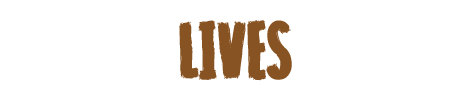
<style>
.page{position:relative;width:460px;height:100px;background:#ffffff}
.page>*{position:absolute;margin:0}
.t1{font:79.5px "TheInvadersRegular";color:#885322;scale:0.94 1}
</style>
<div class="page">
<p class="t1" style="left:179px;top:20px;width:113px;height:61px">Lives</p>
</div>
